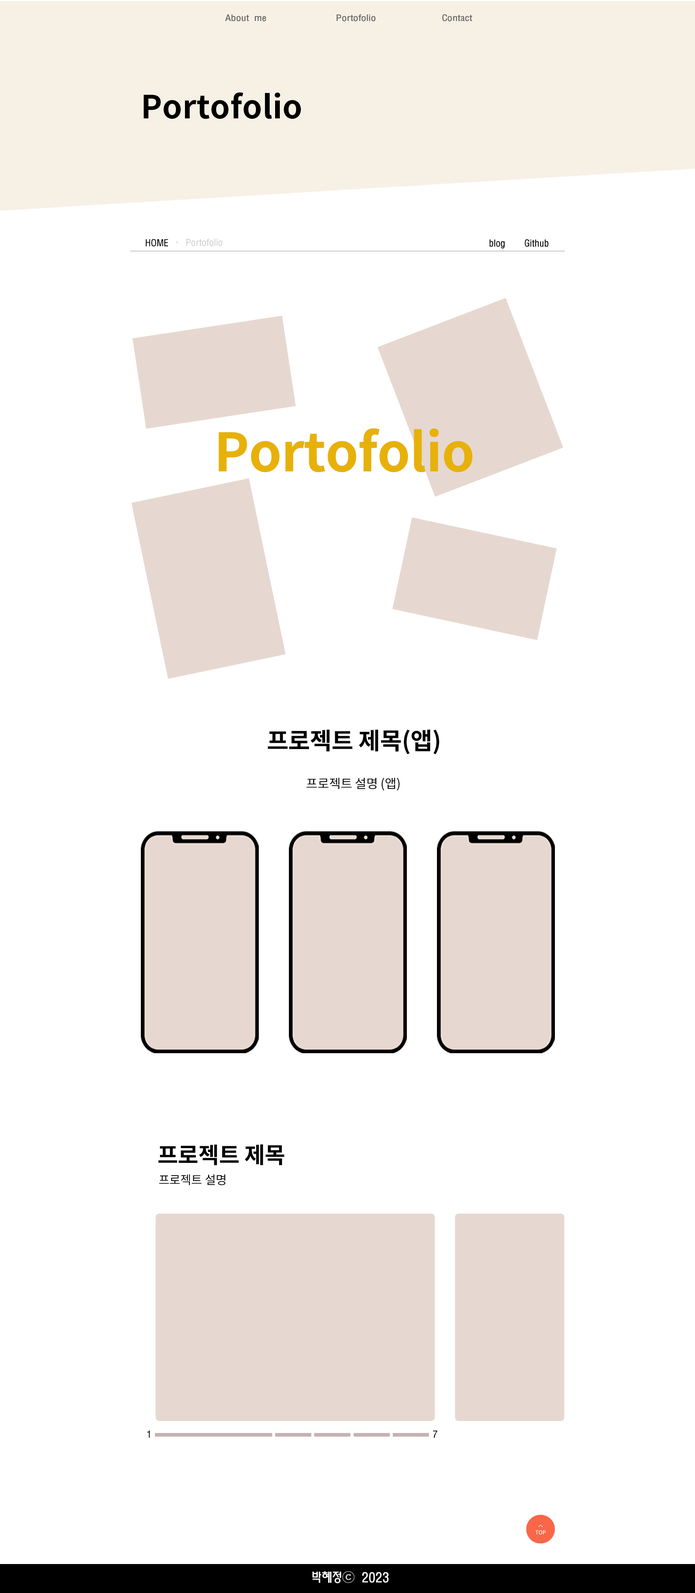
<style>
.page{position:relative;width:695px;height:1593px;background:#ffffff}
.page>*{position:absolute;margin:0}
.t1{font:8.1px "MoeumTR-HM";letter-spacing:-0.01em;color:#636362;scale:1.18 1}
.t2{font:31.9px "NotoSansKR-Bold";letter-spacing:0.005em;color:#000000}
.t3{font:8.8px "MoeumTR-HM";letter-spacing:-0.01em;color:#000000}
.t4{font:8.8px "MoeumTR-HM";letter-spacing:-0.01em;color:#d2d2d2}
.t5{font:52.9px "NotoSansKR-Bold";letter-spacing:-0.01em;color:#e7b10a}
.t6{font:23.8px "NotoSansKR-Bold";letter-spacing:-0.01em;color:#000000}
.t7{font:12.7px "NotoSansKR-Regular";letter-spacing:-0.01em;color:#000000}
.t8{font:22.5px "NotoSansKR-Bold";letter-spacing:-0.01em;color:#000000}
.t9{font:12px "NotoSansKR-Regular";letter-spacing:-0.01em;color:#000000}
.t10{font:9px "MoeumTR-HM";letter-spacing:-0.01em;color:#000000}
.t11{font:12.7px "MoeumTR-HM";letter-spacing:-0.01em;color:#ffffff}
</style>
<div class="page">
<p class="t1" style="left:225px;top:14px;width:41px;height:7px">About me</p>
<p class="t1" style="left:337px;top:14px;width:39px;height:7px">Portofolio</p>
<p class="t1" style="left:442px;top:14px;width:30px;height:7px">Contact</p>
<p class="t2" style="left:144px;top:92px;width:157px;height:27px">Portofolio</p>
<p class="t3" style="left:145px;top:239px;width:23px;height:7px">HOME</p>
<p class="t4" style="left:176px;top:239px;width:46px;height:7px">·  Portofolio</p>
<p class="t3" style="left:489px;top:239px;width:59px;height:10px">blog    Github</p>
<p class="t5" style="left:219px;top:428px;width:253px;height:44px">Portofolio</p>
<p class="t6" style="left:268px;top:729px;width:171px;height:25px">프로젝트 제목(앱)</p>
<p class="t7" style="left:306px;top:777px;width:94px;height:13px">프로젝트　설명 (앱)</p>
<p class="t8" style="left:158px;top:1144px;width:126px;height:21px">프로젝트 제목</p>
<p class="t9" style="left:159px;top:1174px;width:66px;height:11px">프로젝트　설명</p>
<p class="t10" style="left:147px;top:1430px;width:3px;height:8px">1</p>
<p class="t10" style="left:433px;top:1430px;width:4px;height:8px">7</p>
<p class="t11" style="left:312px;top:1571px;width:77px;height:12px">박혜정ⓒ 2023</p>
</div>
